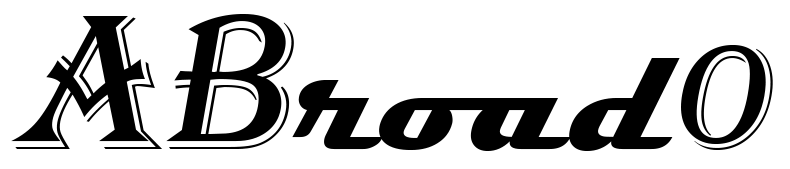
<style>
.page{position:relative;width:790px;height:169px;background:#ffffff}
.page>*{position:absolute;margin:0}
.t1{font:155.3px "Magneto-Bold";color:#000000;font-style:italic}
.t2{font:200px "Algerian";color:#000000;font-style:italic}
.t3{font:155.3px "Algerian";color:#000000;font-style:italic}
</style>
<div class="page">
<p class="t1" style="left:11px;top:14px;width:762px;height:137px"><span class="t2">Ab</span>road<span class="t3">o</span></p>
</div>
